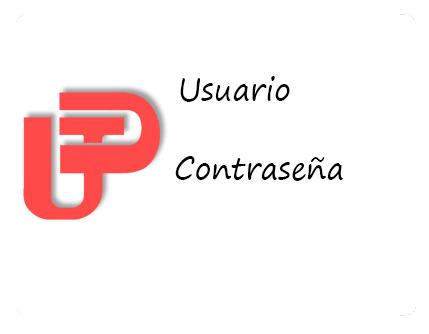
<style>
.page{position:relative;width:429px;height:334px;background:#ffffff}
.page>*{position:absolute;margin:0}
.t1{font:30px "SegoePrint";color:#000000}
</style>
<div class="page">
<p class="t1" style="left:180px;top:76px;width:110px;height:26px">Usuario</p>
<p class="t1" style="left:175px;top:156px;width:168px;height:25px">Contraseña</p>
</div>
